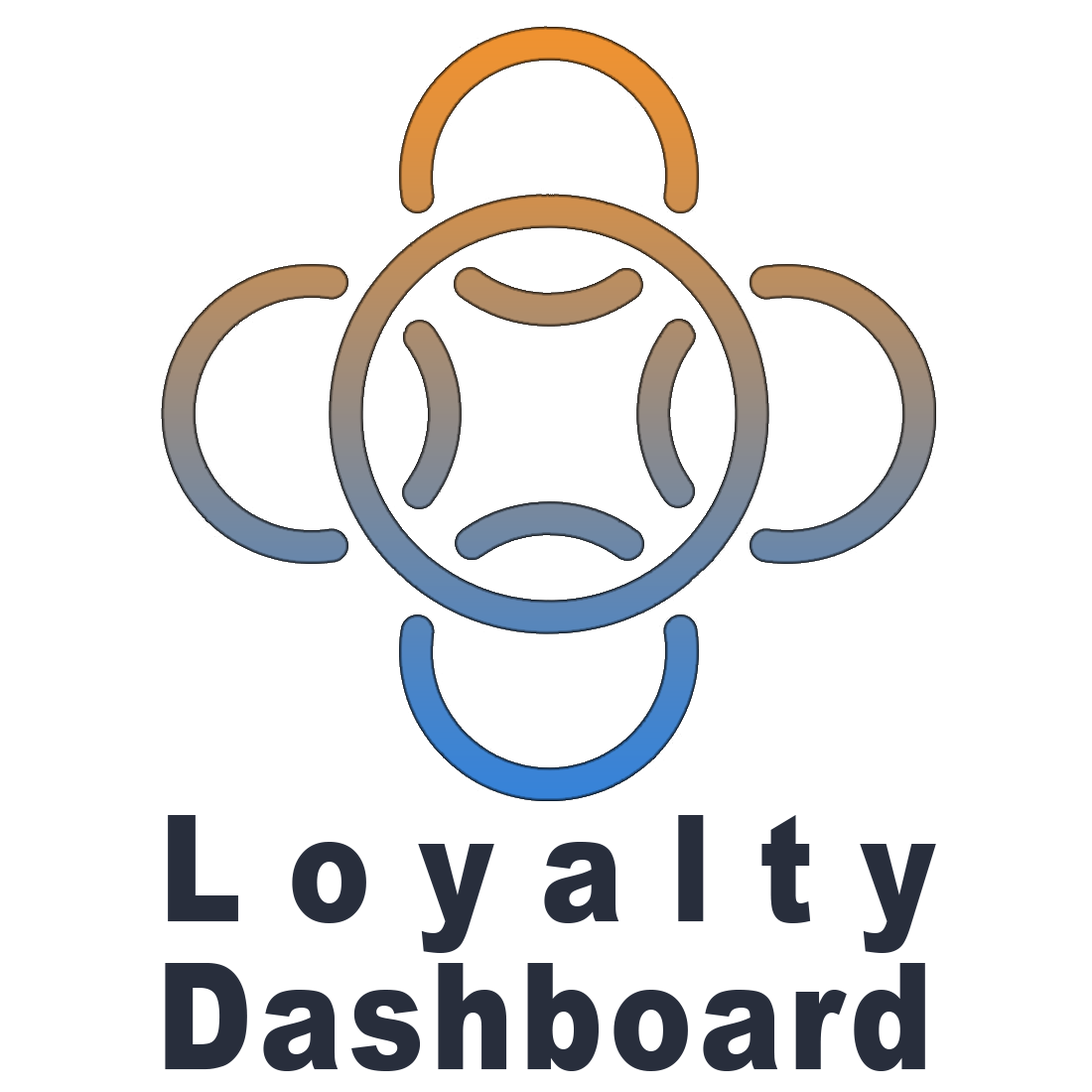
<style>
.page{position:relative;width:1092px;height:1092px;background:#ffffff}
.page>*{position:absolute;margin:0}
.t1{font:148.9px "Arial-Black";letter-spacing:0.06em;color:#282e3c;scale:0.83 1}
</style>
<div class="page">
<p class="t1" style="left:168px;top:815px;width:768px;height:138px">Loyalty</p>
<p class="t1" style="left:165px;top:963px;width:760px;height:108px">Dashboard</p>
</div>
